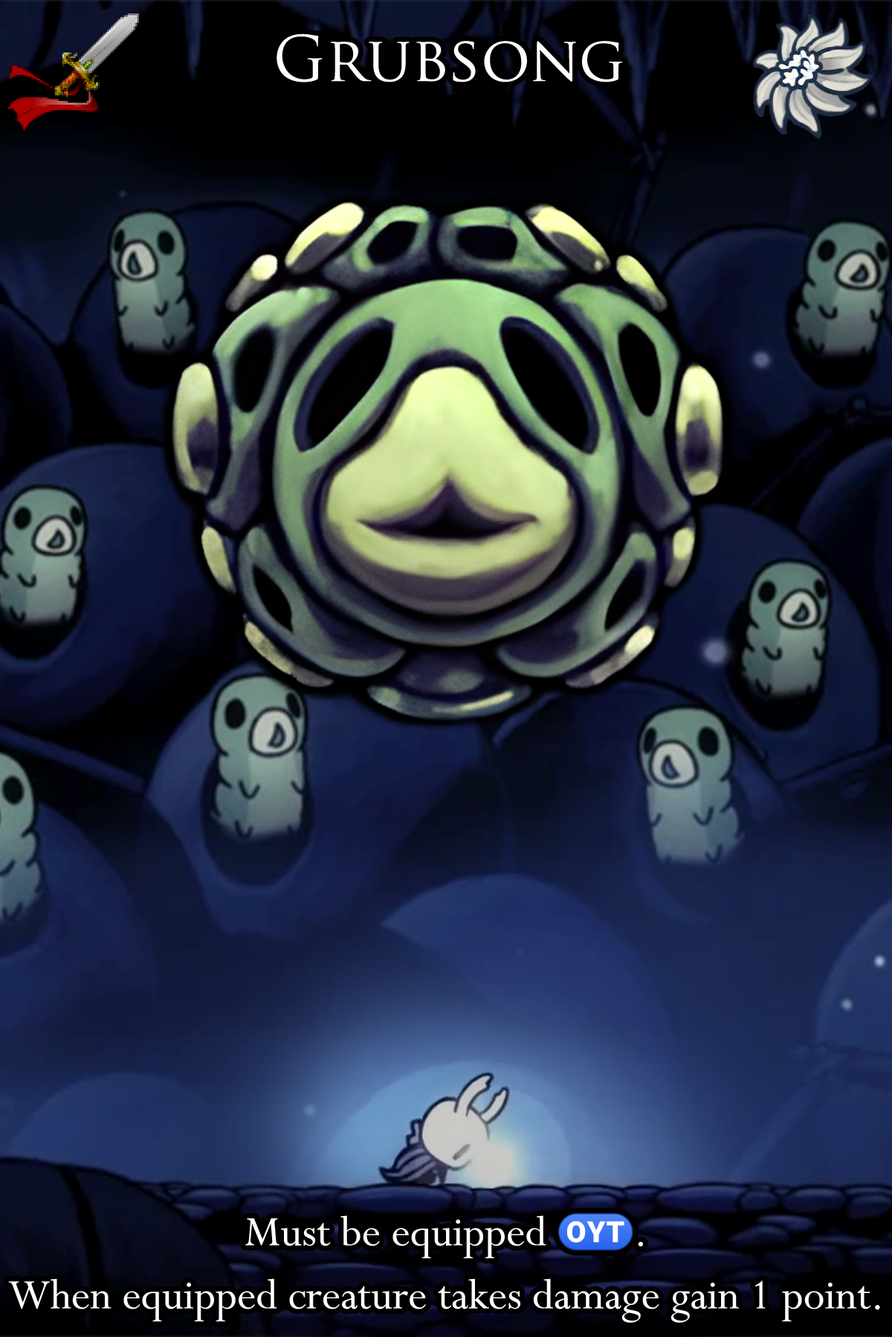
<style>
.page{position:relative;width:892px;height:1337px}
.page>*{position:absolute;margin:0}
.t1{font:104.8px "TrajanPro-Regular";color:#ffffff}
.t2{font:80.2px/63.2px "Perpetua";color:#ffffff}
.t3{font:65.3px/63.2px "stoogedings-Regular";color:#ffffff}
</style>
<div class="page">
<p class="t1" style="left:276px;top:33px;width:347px;height:49px">Grubsong</p>
<p class="t2" style="left:8px;top:1213px;width:872px;height:110px;text-align:center">Must be equipped <span class="t3">(OYT)</span>.<br>When equipped creature takes damage gain 1 point.</p>
</div>
